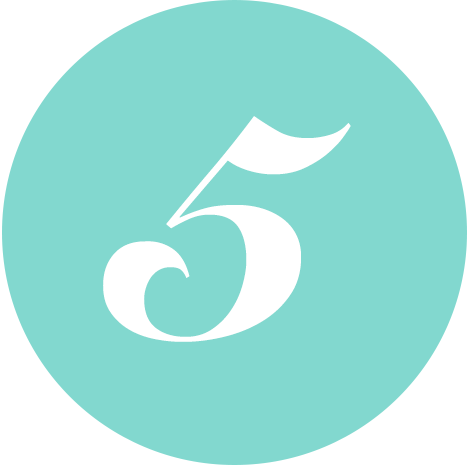
<style>
.page{position:relative;width:469px;height:468px;background:#82d8cf}
.page>*{position:absolute;margin:0}
.t1{font:400px "SnellRoundhand-Black";color:#ffffff}
</style>
<div class="page">
<p class="t1" style="left:103px;top:116px;width:248px;height:226px">5</p>
</div>
